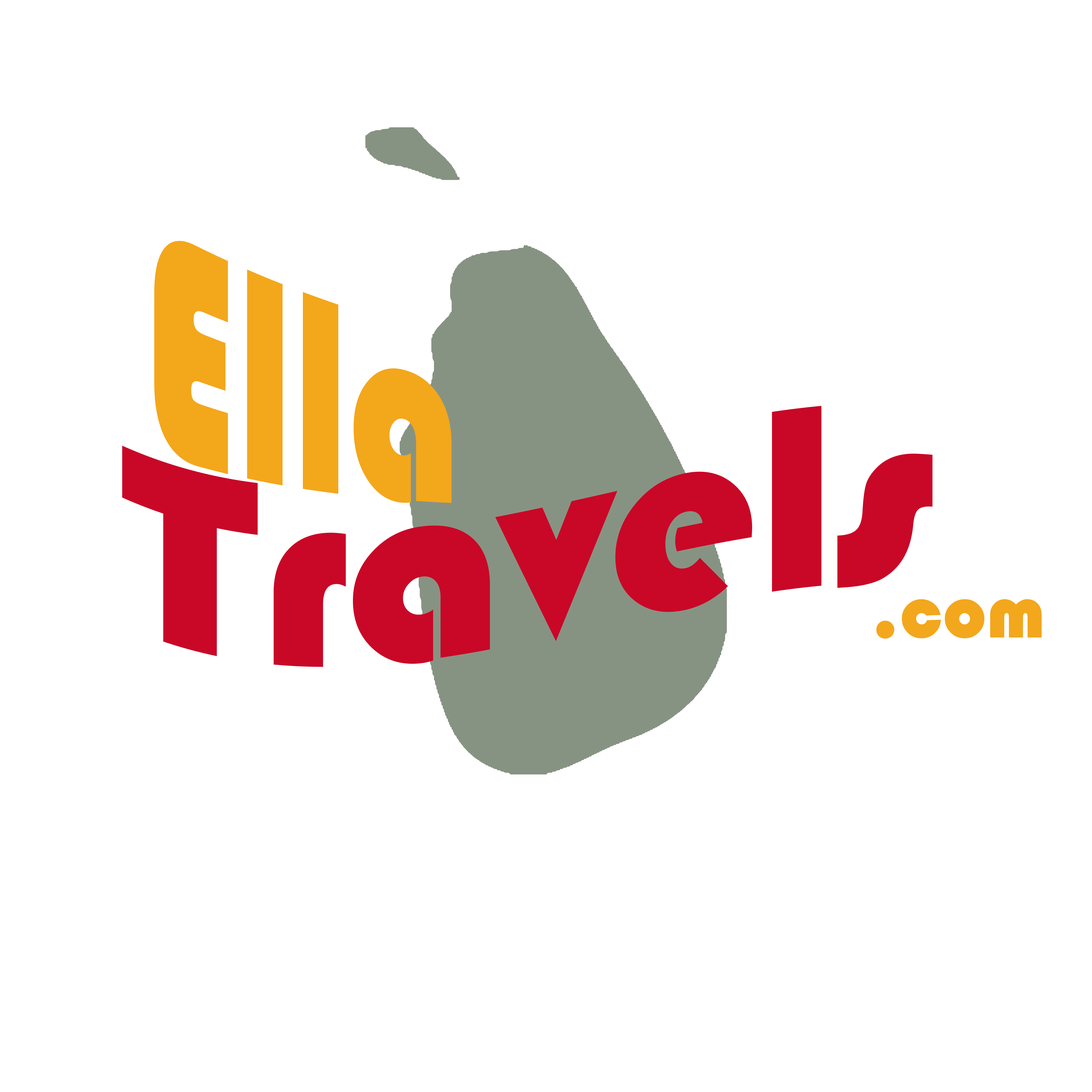
<style>
.page{position:relative;width:1092px;height:1092px;background:#ffffff}
.page>*{position:absolute;margin:0}
.t1{font:192.6px "Bauhaus93";color:#f3a71b}
.t2{font:269.7px "Bauhaus93";color:#c90727}
.t3{font:77px "Bauhaus93";color:#f3a71c}
</style>
<div class="page">
<p class="t1" style="left:154px;top:241px;width:298px;height:262px">Ella</p>
<p class="t2" style="left:122px;top:406px;width:811px;height:261px">Travels</p>
<p class="t3" style="left:876px;top:599px;width:166px;height:40px">.com</p>
</div>
